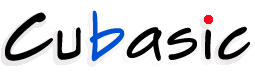
<style>
.page{position:relative;width:255px;height:75px;background:#ffffff}
.page>*{position:absolute;margin:0}
.t1{font:60px "SketchFlowPrint";color:#000000;font-weight:bold}
.t2{font:70px "SketchFlowPrint";color:#000000;font-weight:bold}
.t3{font:60px "SketchFlowPrint";color:#0050d4;font-weight:bold}
</style>
<div class="page">
<p class="t1" style="left:5px;top:10px;width:245px;height:52px"><span class="t2">C</span>u<span class="t3">b</span>asic</p>
</div>
